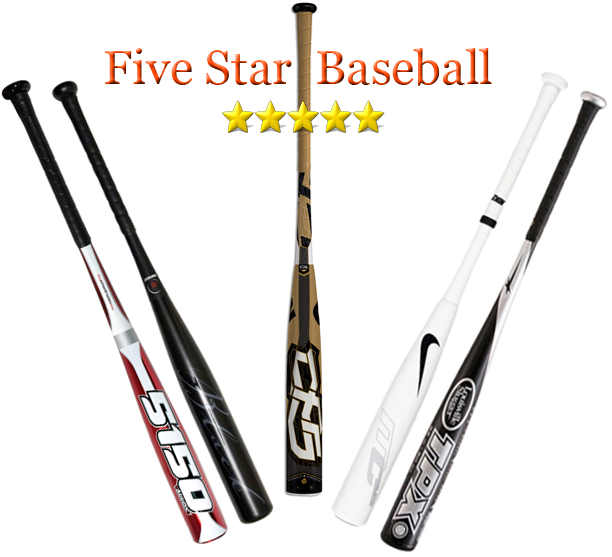
<style>
.page{position:relative;width:612px;height:557px;background:#ffffff}
.page>*{position:absolute;margin:0}
.t1{font:48px "Georgia"}
</style>
<div class="page">
<p class="t1" style="left:105px;top:48px;width:387px;height:38px">Five Star  Baseball</p>
</div>
